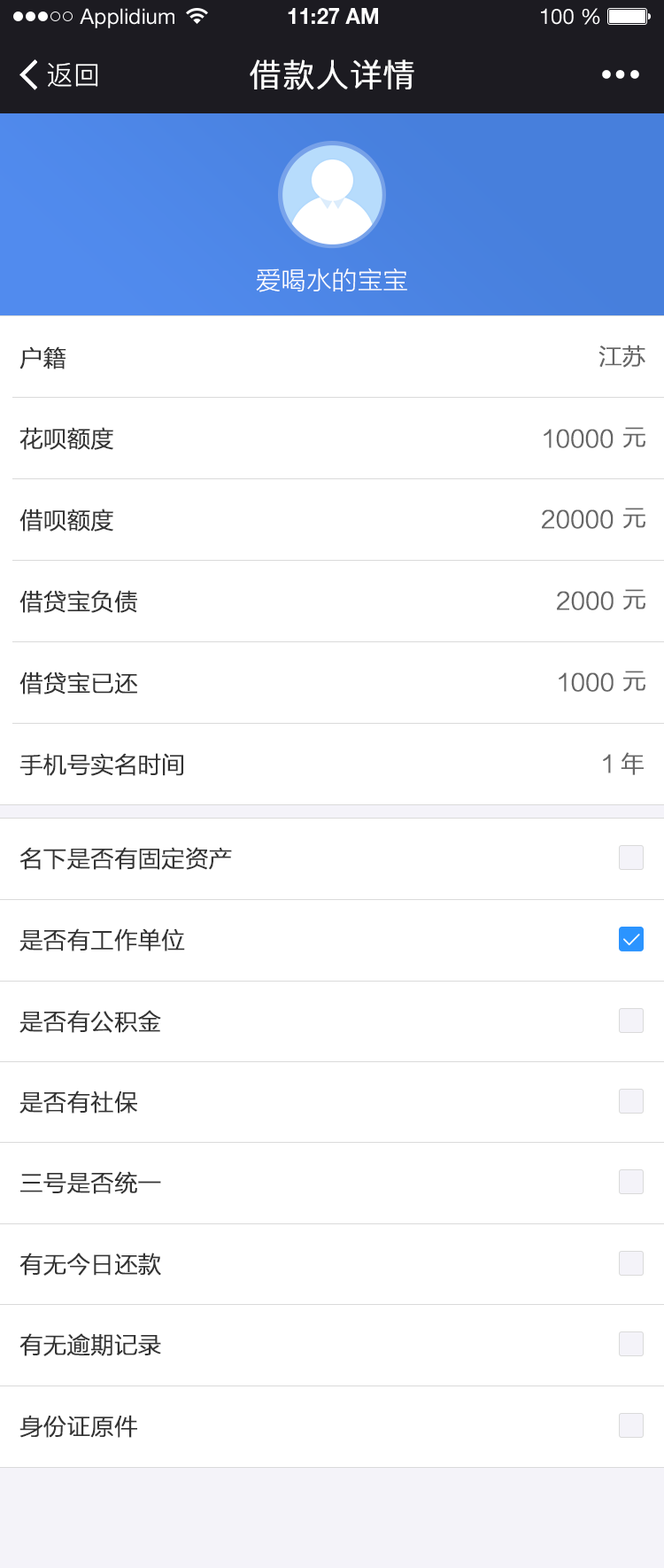
<style>
.page{position:relative;width:664px;height:1568px;background:#ffffff}
.page>*{position:absolute;margin:0}
.t1{font:21.3px "HelveticaNeueLTStd-Roman";color:#ffffff}
.t2{font:21.3px "HelveticaNeueLTStd-Bd";color:#ffffff}
.t3{font:26.6px "PingFang-SC-Regular";letter-spacing:0.025em;color:#ffffff}
.t4{font:31.9px "PingFang-SC-Regular";letter-spacing:0.025em;color:#ffffff;font-weight:bold}
.t5{font:24.8px "FZLTXHK--GBK1-0";letter-spacing:0.025em;color:#ffffff}
.t6{font:23px "FZLTXHK--GBK1-0";color:#333333;font-weight:bold}
.t7{font:23px "FZLTXHK--GBK1-0";color:#666666;font-weight:bold}
</style>
<div class="page">
<p class="t1" style="left:80px;top:8px;width:95px;height:20px">Applidium</p>
<p class="t2" style="left:288px;top:8px;width:90px;height:16px">11:27 AM</p>
<p class="t1" style="left:541px;top:8px;width:60px;height:17px">100 %</p>
<p class="t3" style="left:47px;top:63px;width:51px;height:24px">返回</p>
<p class="t4" style="left:250px;top:59px;width:165px;height:31px">借款人详情</p>
<p class="t5" style="left:256px;top:268px;width:152px;height:24px">爱喝水的宝宝</p>
<p class="t6" style="left:19px;top:346px;width:47px;height:23px">户籍</p>
<p class="t7" style="left:599px;top:345px;width:47px;height:23px">江苏</p>
<p class="t6" style="left:19px;top:427px;width:94px;height:23px">花呗额度</p>
<p class="t7" style="left:544px;top:429px;width:70px;height:19px">10000</p>
<p class="t7" style="left:624px;top:427px;width:22px;height:21px">元</p>
<p class="t6" style="left:19px;top:508px;width:94px;height:24px">借呗额度</p>
<p class="t7" style="left:542px;top:509px;width:72px;height:20px">20000</p>
<p class="t7" style="left:624px;top:508px;width:22px;height:21px">元</p>
<p class="t6" style="left:19px;top:590px;width:118px;height:23px">借贷宝负债</p>
<p class="t7" style="left:557px;top:591px;width:57px;height:19px">2000</p>
<p class="t7" style="left:624px;top:589px;width:22px;height:21px">元</p>
<p class="t6" style="left:19px;top:671px;width:118px;height:24px">借贷宝已还</p>
<p class="t7" style="left:559px;top:672px;width:55px;height:20px">1000</p>
<p class="t7" style="left:624px;top:671px;width:22px;height:21px">元</p>
<p class="t6" style="left:19px;top:753px;width:164px;height:23px">手机号实名时间</p>
<p class="t7" style="left:603px;top:752px;width:41px;height:23px">1年</p>
<p class="t6" style="left:19px;top:847px;width:213px;height:23px">名下是否有固定资产</p>
<p class="t6" style="left:19px;top:928px;width:166px;height:23px">是否有工作单位</p>
<p class="t6" style="left:19px;top:1010px;width:142px;height:23px">是否有公积金</p>
<p class="t6" style="left:19px;top:1091px;width:118px;height:23px">是否有社保</p>
<p class="t6" style="left:20px;top:1171px;width:141px;height:23px">三号是否统一</p>
<p class="t6" style="left:19px;top:1253px;width:142px;height:23px">有无今日还款</p>
<p class="t6" style="left:19px;top:1333px;width:142px;height:23px">有无逾期记录</p>
<p class="t6" style="left:19px;top:1415px;width:118px;height:23px">身份证原件</p>
</div>
